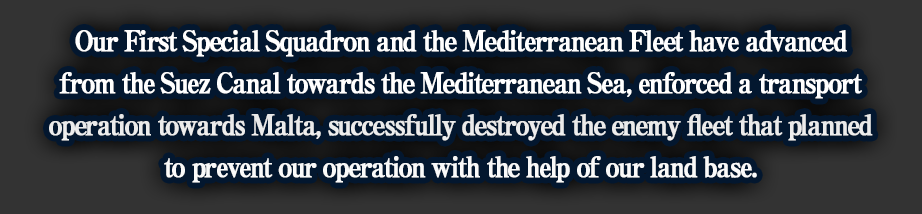
<style>
.page{position:relative;width:922px;height:214px;background:#03172f}
.page>*{position:absolute;margin:0}
.t1{font:28px/42px "RyuminPro-ExBold";letter-spacing:-0.08em;color:#ffffff;font-weight:bold;scale:0.9 1}
</style>
<div class="page">
<p class="t1" style="left:49px;top:30px;width:824px;height:153px;text-align:center">Our First Special Squadron and the Mediterranean Fleet have advanced<br>from the Suez Canal towards the Mediterranean Sea, enforced a transport<br>operation towards Malta, successfully destroyed the enemy fleet that planned<br>to prevent our operation with the help of our land base.</p>
</div>
